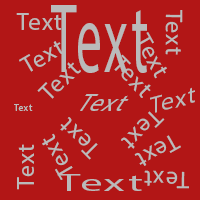
<style>
.page{position:relative;width:200px;height:200px;background:#b21616}
.page>*{position:absolute;margin:0}
.t1{font:99px "MyriadPro-Regular";letter-spacing:0.05em;color:#bababa;scale:0.52 1}
.t2{font:24px "MyriadPro-Regular";letter-spacing:0.05em;color:#bababa}
.t3{font:24px "MyriadPro-Regular";letter-spacing:0.05em;color:#bababa;scale:1.03 1}
.t4{font:29px "MyriadPro-Regular";letter-spacing:0.05em;color:#bababa;scale:0.83 1}
.t5{font:10.4px "MyriadPro-Regular";letter-spacing:0.05em;color:#bababa;scale:0.91 1}
.t6{font:24px "MyriadPro-Regular";letter-spacing:0.05em;color:#bababa;scale:1.87 1}
</style>
<div class="page">
<p class="t1" style="left:51px;top:5px;width:96px;height:68px">Text</p>
<p class="t2" style="left:16px;top:13px;width:46px;height:17px">Text</p>
<p class="t2" style="left:165px;top:10px;width:18px;height:45px;rotate:91deg">Text</p>
<p class="t2" style="left:19px;top:41px;width:47px;height:31px;rotate:-30deg">Text</p>
<p class="t2" style="left:136px;top:32px;width:31px;height:47px;rotate:61deg">Text</p>
<p class="t2" style="left:114px;top:54px;width:37px;height:44px;rotate:46deg">Text</p>
<p class="t2" style="left:37px;top:62px;width:44px;height:37px;rotate:-45deg">Text</p>
<p class="t3" style="left:150px;top:87px;width:45px;height:26px;rotate:-15deg">Text</p>
<p class="t4" style="left:80px;top:94px;width:49px;height:17px">Text</p>
<p class="t5" style="left:14px;top:104px;width:19px;height:7px">Text</p>
<p class="t2" style="left:121px;top:111px;width:44px;height:38px;rotate:136deg">Text</p>
<p class="t2" style="left:60px;top:117px;width:38px;height:43px;rotate:-135deg">Text</p>
<p class="t2" style="left:42px;top:133px;width:31px;height:47px;rotate:-120deg">Text</p>
<p class="t2" style="left:134px;top:135px;width:47px;height:31px;rotate:151deg">Text</p>
<p class="t2" style="left:17px;top:144px;width:17px;height:46px;rotate:-90deg">Text</p>
<p class="t6" style="left:57px;top:174px;width:85px;height:17px">Text</p>
<p class="t2" style="left:144px;top:170px;width:45px;height:19px;rotate:-179deg">Text</p>
</div>
